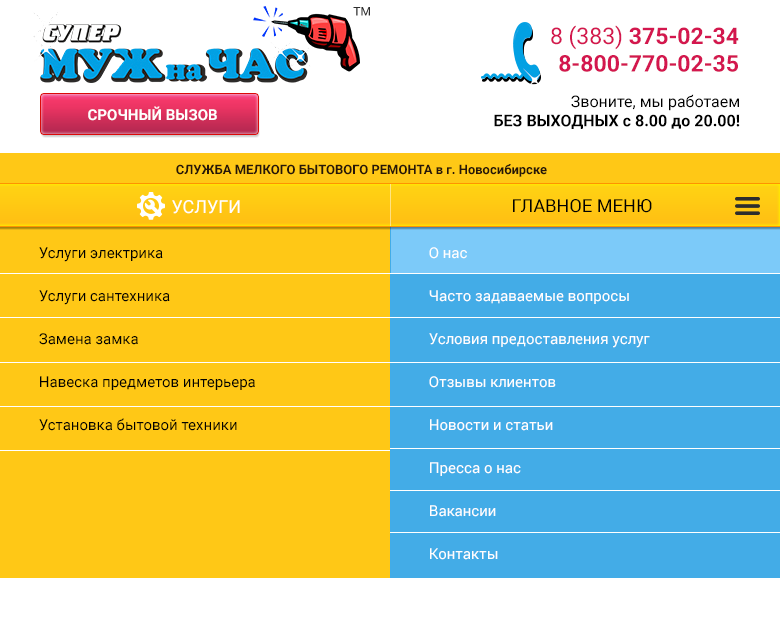
<style>
.page{position:relative;width:780px;height:618px;background:#ffc816}
.page>*{position:absolute;margin:0}
.t1{font:23px "Roboto-Bold";color:#d3174e}
.t2{font:23px "Roboto-Regular";color:#d3174e}
.t3{font:16px "Roboto-Regular";color:#000000}
.t4{font:16px "Roboto-Bold";color:#000000;text-transform:uppercase}
.t5{font:16px "Roboto-Bold";color:#000000}
.t6{font:15px "Roboto-Bold";color:#fffefe;text-transform:uppercase}
.t7{font:13px "Roboto-Bold";color:#271709;text-transform:uppercase}
.t8{font:13px "Roboto-Bold";color:#271709}
.t9{font:18px "Roboto-Regular";color:#ffffff;text-transform:uppercase}
.t10{font:18px "Roboto-Regular";color:#020202;text-transform:uppercase}
.t11{font:15px "Roboto-Regular";color:#020202}
.t12{font:15px "Roboto-Regular";color:#fffefe}
</style>
<div class="page">
<p class="t1" style="left:551px;top:25px;width:188px;height:47px;text-align:right"><span class="t2">8 (383) </span>375-02-34<br>8-800-770-02-35</p>
<p class="t3" style="left:494px;top:94px;width:246px;height:35px;text-align:right">Звоните, мы работаем<br><span class="t4">без выходных</span><span class="t5"> c 8.00 до 20.00!</span></p>
<p class="t6" style="left:88px;top:106px;width:129px;height:15px">Срочный вызов</p>
<p class="t7" style="left:176px;top:164px;width:371px;height:13px">служба мелкого бытового ремонта <span class="t8">в г. Новосибирске</span></p>
<p class="t9" style="left:172px;top:200px;width:68px;height:14px">услуги</p>
<p class="t10" style="left:513px;top:199px;width:139px;height:14px">ГЛАВНОЕ меню</p>
<p class="t11" style="left:39px;top:247px;width:216px;height:184px">Услуги электрика<br>Услуги сантехника<br>Замена замка<br>Навеска предметов интерьера<br>Установка бытовой техники</p>
<p class="t12" style="left:429px;top:247px;width:221px;height:313px">О нас<br>Часто задаваемые вопросы<br>Условия предоставления услуг<br>Отзывы клиентов<br>Новости и статьи<br>Пресса о нас<br>Вакансии<br>Контакты</p>
</div>
